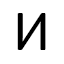
<style>
.page{position:relative;width:64px;height:64px;background:#ffffff}
.page>*{position:absolute;margin:0}
.t1{font:58.3px "Calibri";color:#000000}
</style>
<div class="page">
<p class="t1" style="left:17px;top:13px;width:29px;height:37px">И</p>
</div>
